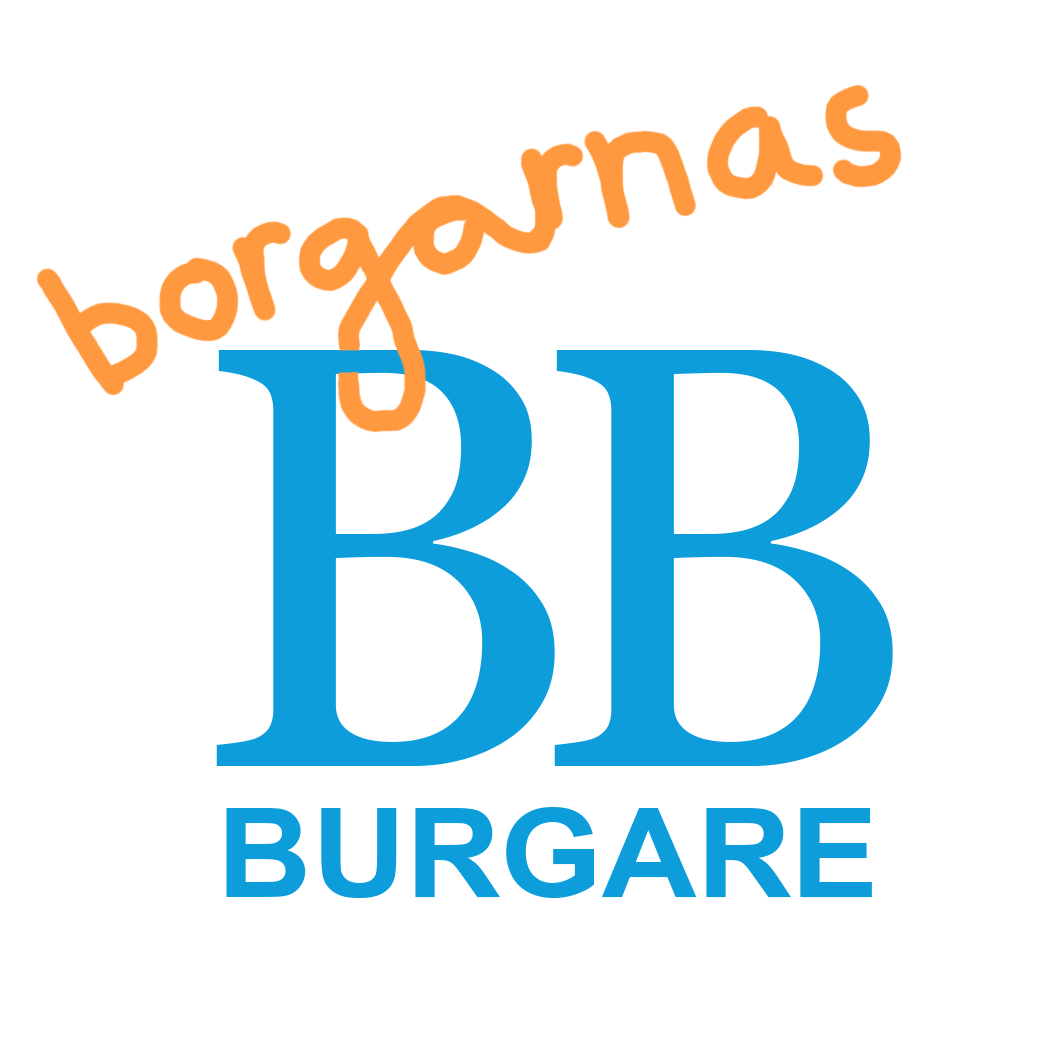
<style>
.page{position:relative;width:1055px;height:1055px;background:#ffffff}
.page>*{position:absolute;margin:0}
.t1{font:600px "Georgia";color:#0d9ddb}
.t2{font:124.3px "Arial-BoldMT";color:#0d9ddb;scale:1.05 1}
</style>
<div class="page">
<p class="t1" style="left:216px;top:350px;width:339px;height:416px">B</p>
<p class="t1" style="left:554px;top:350px;width:339px;height:416px">B</p>
<p class="t2" style="left:226px;top:807px;width:646px;height:91px">BURGARE</p>
</div>
